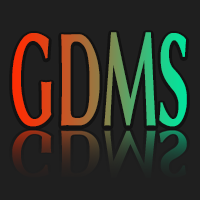
<style>
.page{position:relative;width:200px;height:200px;background:#1f1f1f}
.page>*{position:absolute;margin:0}
.t1{font:139.9px "LinBiolinumB";scale:0.43 1}
</style>
<div class="page">
<p class="t1" style="left:12px;top:32px;width:175px;height:95px">GDMS</p>
</div>
